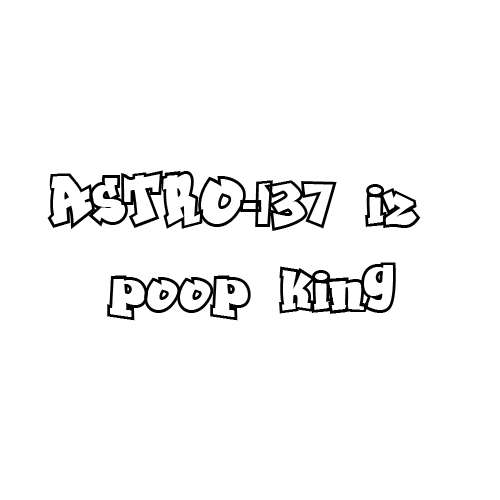
<style>
.page{position:relative;width:500px;height:500px;background:#ffffff}
.page>*{position:absolute;margin:0}
.t1{font:72px "Grafitty";letter-spacing:-0.02em;color:#000000}
</style>
<div class="page">
<p class="t1" style="left:47px;top:170px;width:374px;height:151px;text-align:center">ASTRO-137 iz <br>poop king</p>
</div>
